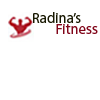
<style>
.page{position:relative;width:100px;height:100px;background:#ffffff}
.page>*{position:absolute;margin:0}
.t1{font:14.7px "MyriadPro-Regular";color:#191902}
.t2{font:14.7px "MyriadPro-Regular";color:#81061a}
</style>
<div class="page">
<p class="t1" style="left:33px;top:12px;width:48px;height:11px">Radina’s</p>
<p class="t2" style="left:56px;top:24px;width:42px;height:10px">Fitness</p>
</div>
